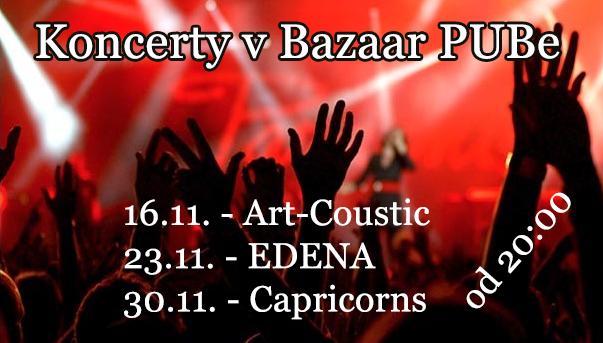
<style>
.page{position:relative;width:603px;height:343px}
.page>*{position:absolute;margin:0}
.t1{font:48px "Georgia";letter-spacing:0.01em;color:#ffffff}
.t2{font:36px "Georgia";letter-spacing:0.01em;color:#ffffff}
</style>
<div class="page">
<p class="t1" style="left:36px;top:24px;width:524px;height:45px">Koncerty v Bazaar PUBe</p>
<p class="t2" style="left:124px;top:198px;width:306px;height:122px">16.11. - Art-Coustic<br>23.11. - EDENA<br>30.11. - Capricorns</p>
<p class="t2" style="left:466px;top:192px;width:105px;height:117px;rotate:-48deg">od 20:00</p>
</div>
